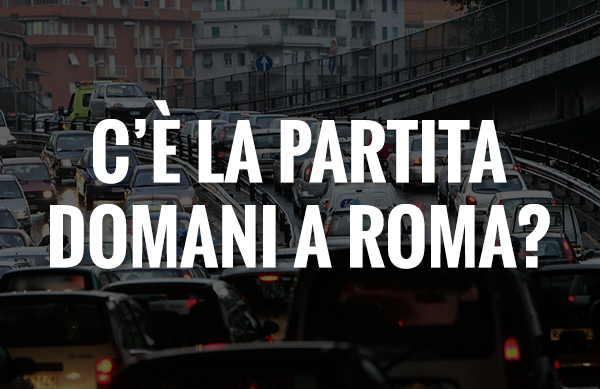
<style>
.page{position:relative;width:600px;height:389px}
.page>*{position:absolute;margin:0}
.t1{font:70.9px "Oswald-Bold";color:#ffffff;text-transform:uppercase}
</style>
<div class="page">
<p class="t1" style="left:50px;top:100px;width:500px;height:169px;text-align:center">C’è la partita<br>domani a Roma?</p>
</div>
